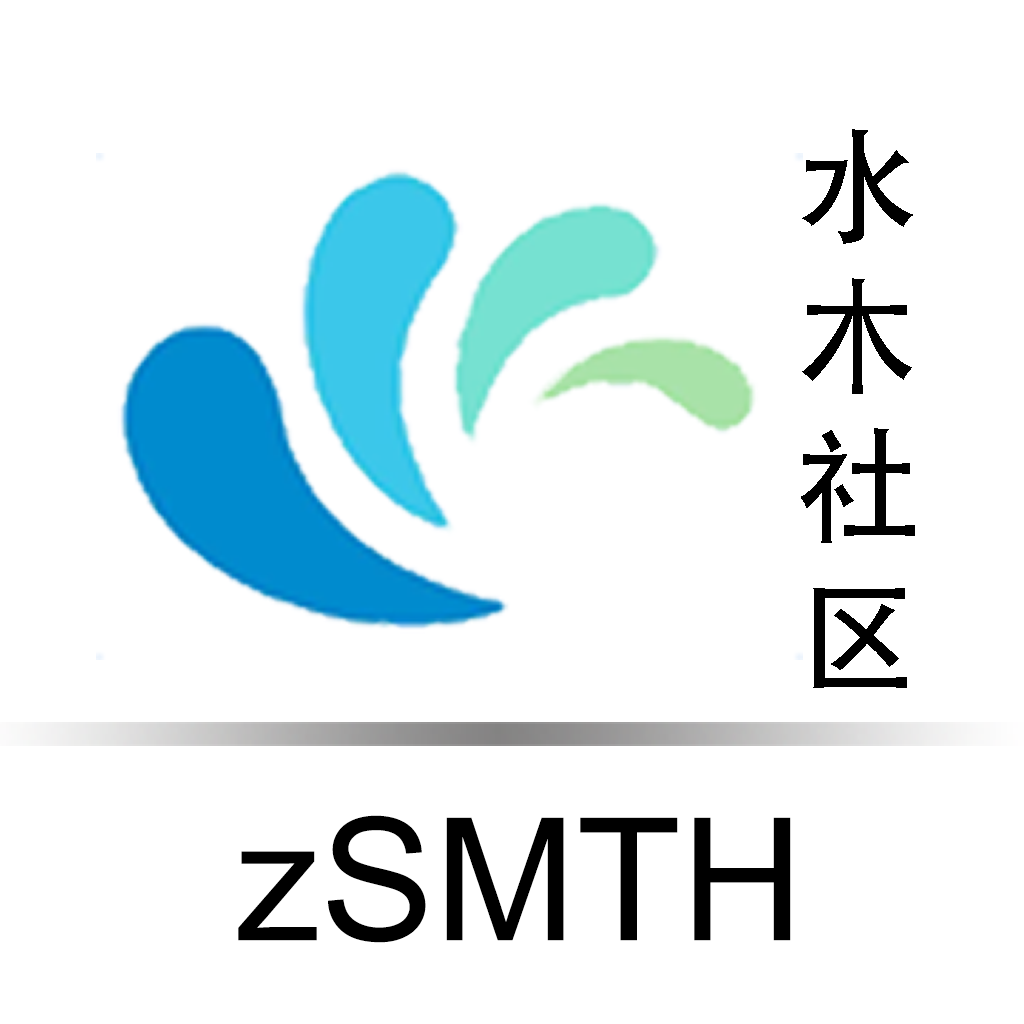
<style>
.page{position:relative;width:1024px;height:1024px;background:#ffffff}
.page>*{position:absolute;margin:0}
.t1{font:125.2px "STHeiti";color:#000000}
.t2{font:170.7px "ArialMT";color:#000000}
</style>
<div class="page">
<p class="t1" style="left:801px;top:129px;width:114px;height:559px">水<br>木<br>社<br>区</p>
<p class="t2" style="left:238px;top:815px;width:553px;height:128px">zSMTH</p>
</div>
